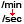
<style>
.page{position:relative;width:24px;height:24px;background:#ffffff}
.page>*{position:absolute;margin:0}
.t1{font:10px "ArialMT";color:#000000;scale:1.06 1}
</style>
<div class="page">
<p class="t1" style="left:1px;top:1px;width:21px;height:7px">/min</p>
<p class="t1" style="left:2px;top:15px;width:20px;height:7px">/sec</p>
</div>
